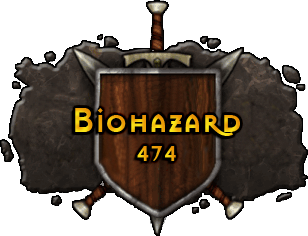
<style>
.page{position:relative;width:308px;height:236px;background:#ffffff}
.page>*{position:absolute;margin:0}
.t1{font:36px "MasonSansBold"}
.t2{font:24px "MasonSansBold";color:#eba209}
</style>
<div class="page">
<p class="t1" style="left:75px;top:108px;width:165px;height:28px">Biohazard</p>
<p class="t2" style="left:137px;top:146px;width:39px;height:15px">474</p>
</div>
